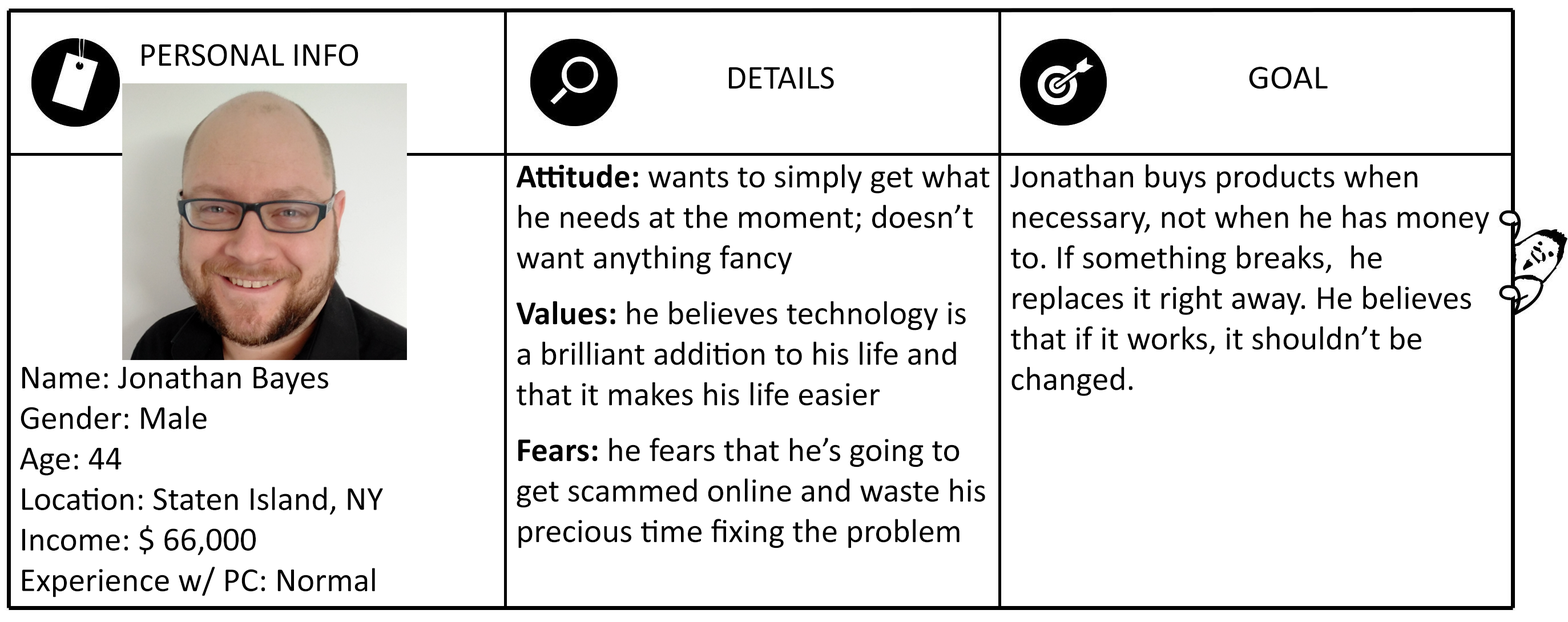
<style>
.page{position:relative;width:1568px;height:622px;background:#ffffff}
.page>*{position:absolute;margin:0}
.t1{font:33.8px "Calibri";color:#000000}
.t2{font:33.8px "Calibri";color:#000000;scale:1.04 1}
.t3{font:33.8px "Calibri-Bold";color:#000000}
</style>
<div class="page">
<p class="t1" style="left:142px;top:44px;width:216px;height:22px">PERSONAL INFO</p>
<p class="t1" style="left:729px;top:67px;width:105px;height:22px">DETAILS</p>
<p class="t2" style="left:1249px;top:67px;width:79px;height:22px">GOAL</p>
<p class="t1" style="left:516px;top:164px;width:474px;height:385px"><span class="t3">Attitude: </span>wants to simply get what he needs at the moment; doesn’t want anything fancy<br><span class="t3">Values:</span> he believes technology is a brilliant addition to his life and that it makes his life easier<br><span class="t3">Fears:</span> he fears that he’s going to get scammed online and waste his precious time fixing the problem</p>
<p class="t1" style="left:1010px;top:164px;width:479px;height:232px">Jonathan buys products when    necessary, not when he has money to. If something breaks,  he           replaces it right away. He believes that if it works, it shouldn’t be changed.</p>
<p class="t1" style="left:20px;top:365px;width:363px;height:233px">Name: Jonathan Bayes<br>Gender: Male<br>Age: 44<br>Location: Staten Island, NY<br>Income: $ 66,000<br>Experience w/ PC: Normal</p>
</div>
